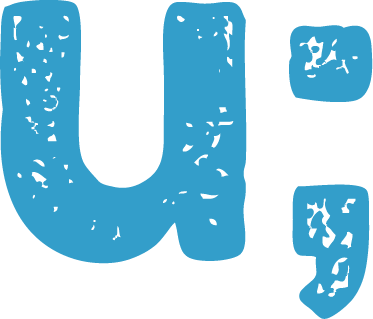
<style>
.page{position:relative;width:373px;height:319px;background:#ffffff}
.page>*{position:absolute;margin:0}
.t1{font:400px "COCOGOOSELETTERPRESS";color:#339eca}
</style>
<div class="page">
<p class="t1" style="left:0px;top:0px;width:373px;height:319px">u;</p>
</div>
